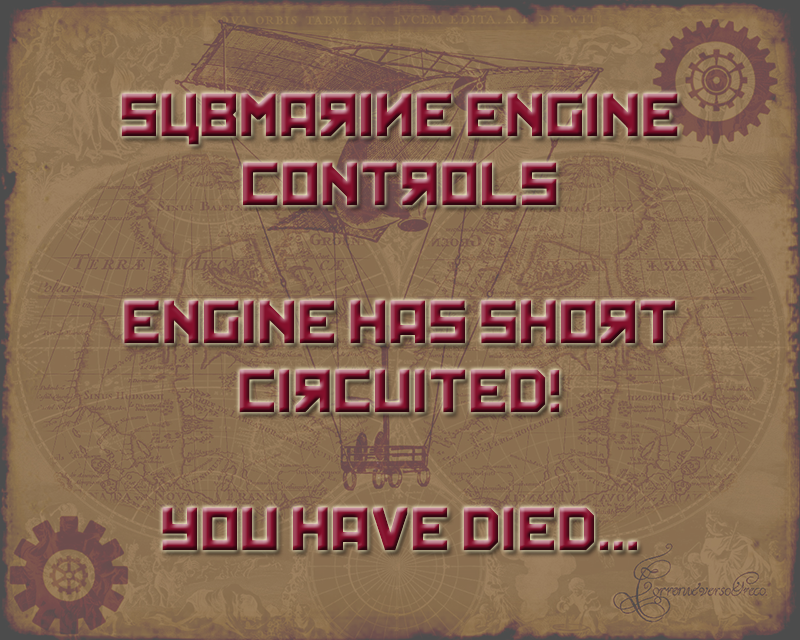
<style>
.page{position:relative;width:800px;height:640px}
.page>*{position:absolute;margin:0}
.t1{font:57.5px "Kremlin"}
</style>
<div class="page">
<p class="t1" style="left:121px;top:93px;width:557px;height:458px;text-align:center">SuBmarinE ENGINE<br>CONTrOLS<br><br>ENGINE HAS SHOrT<br>CIrCUITED!<br><br>YOU HAVE DIED...</p>
</div>
